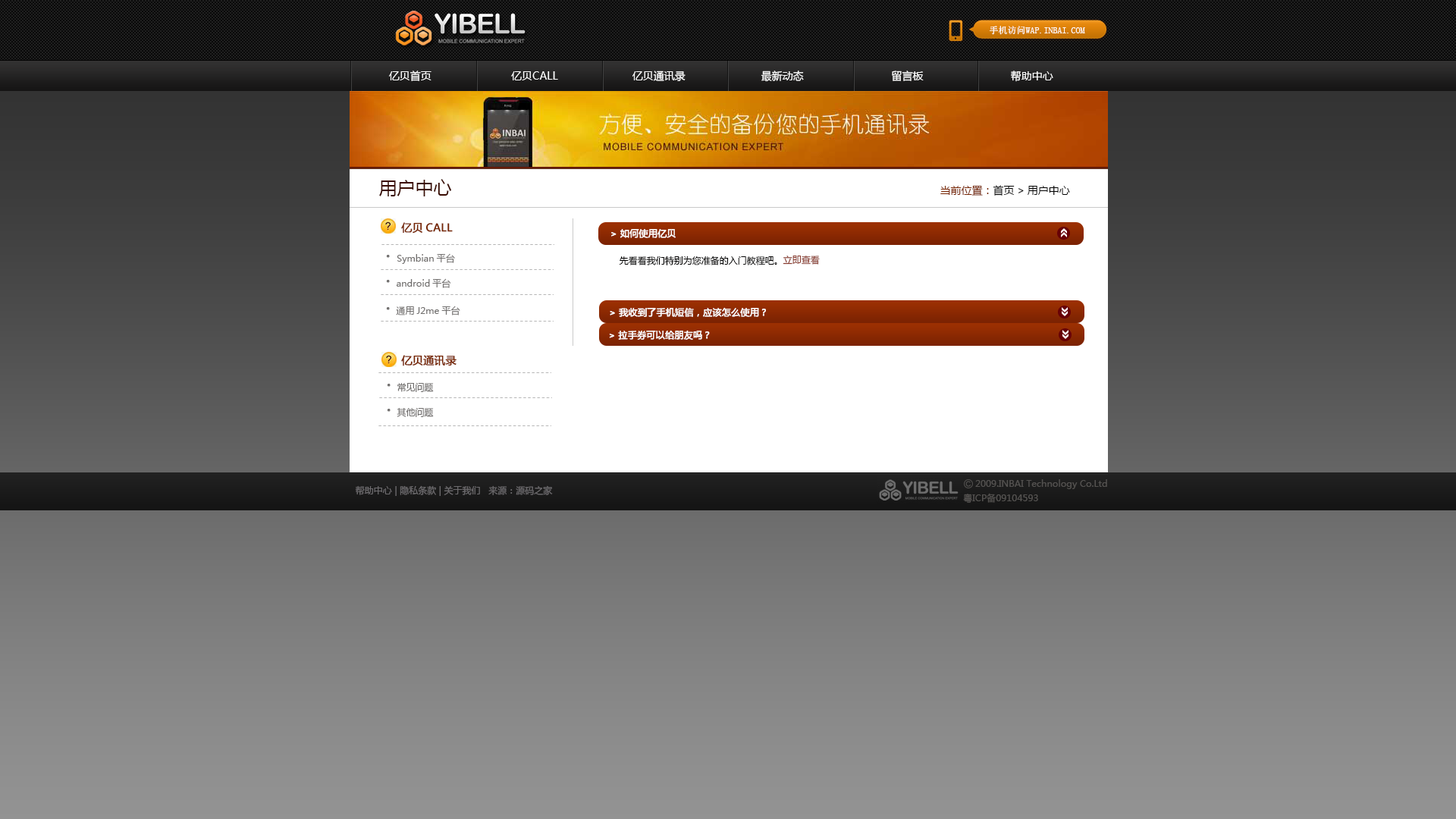
<style>
.page{position:relative;width:1456px;height:819px}
.page>*{position:absolute;margin:0}
.t1{font:9.1px "SimSun";color:#ffffff}
.t2{font:10.6px "MicrosoftYaHei";color:#ffffff}
.t3{font:18.2px "MicrosoftYaHei";color:#3a0b01}
.t4{font:10.6px "MicrosoftYaHei";color:#020202}
.t5{font:10.6px "MicrosoftYaHei";color:#782602}
.t6{font:10.6px "MicrosoftYaHei";color:#782602;font-weight:bold}
.t7{font:9.1px "MicrosoftYaHei";color:#ffffff;font-weight:bold}
.t8{font:9.1px "MicrosoftYaHei";color:#72706f}
.t9{font:18.2px "MicrosoftYaHei";color:#72706f;font-weight:bold}
.t10{font:9.1px "MicrosoftYaHei";color:#010000}
.t11{font:9.1px "MicrosoftYaHei";color:#893b2e}
.t12{font:9.1px "MicrosoftYaHei";color:#6e6c6f}
.t13{font:9.1px "MicrosoftYaHei";color:#545250}
</style>
<div class="page">
<p class="t1" style="left:990px;top:26px;width:95px;height:9px">手机访问WAP.INBAI.COM</p>
<p class="t2" style="left:389px;top:71px;width:42px;height:10px">亿贝首页</p>
<p class="t2" style="left:511px;top:71px;width:47px;height:9px">亿贝CALL</p>
<p class="t2" style="left:632px;top:71px;width:54px;height:10px">亿贝通讯录</p>
<p class="t2" style="left:761px;top:71px;width:43px;height:11px">最新动态</p>
<p class="t2" style="left:892px;top:71px;width:32px;height:10px">留言板</p>
<p class="t2" style="left:1011px;top:71px;width:42px;height:11px">帮助中心</p>
<p class="t3" style="left:379px;top:179px;width:73px;height:17px">用户中心</p>
<p class="t4" style="left:940px;top:185px;width:130px;height:11px"><span class="t5">当前位置：</span>首页&gt;用户中心</p>
<p class="t6" style="left:401px;top:222px;width:52px;height:12px">亿贝CALL</p>
<p class="t7" style="left:611px;top:229px;width:65px;height:9px">&gt; 如何使用亿贝</p>
<p class="t8" style="left:386px;top:253px;width:69px;height:11px"><span class="t9">·  </span>Symbian平台</p>
<p class="t10" style="left:619px;top:256px;width:158px;height:9px">先看看我们特别为您准备的入门教程吧。</p>
<p class="t11" style="left:783px;top:255px;width:37px;height:10px">立即查看</p>
<p class="t8" style="left:386px;top:278px;width:65px;height:10px"><span class="t9">· </span>android平台</p>
<p class="t8" style="left:386px;top:306px;width:74px;height:9px"><span class="t9">· </span>通用J2me平台</p>
<p class="t7" style="left:610px;top:307px;width:156px;height:10px">&gt; 我收到了手机短信，应该怎么使用？</p>
<p class="t7" style="left:609px;top:330px;width:101px;height:10px">&gt; 拉手券可以给朋友吗？</p>
<p class="t6" style="left:401px;top:355px;width:56px;height:11px">亿贝通讯录</p>
<p class="t8" style="left:387px;top:383px;width:47px;height:9px"><span class="t9">· </span>常见问题</p>
<p class="t8" style="left:387px;top:407px;width:47px;height:10px"><span class="t9">· </span>其他问题</p>
<p class="t12" style="left:355px;top:485px;width:198px;height:11px">帮助中心 | 隐私条款 | 关于我们   来源：源码之家</p>
<p class="t13" style="left:975px;top:479px;width:132px;height:10px">2009.INBAI Technology Co.Ltd</p>
<p class="t13" style="left:963px;top:493px;width:75px;height:10px">粤ICP备09104593</p>
</div>
